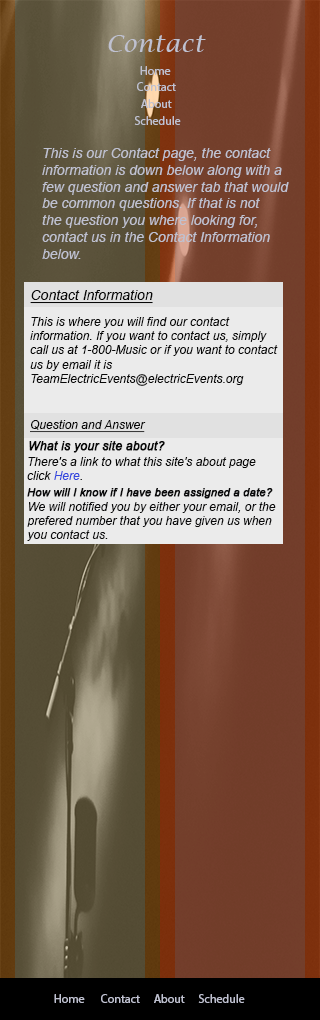
<style>
.page{position:relative;width:320px;height:1020px}
.page>*{position:absolute;margin:0}
.t1{font:24px "LucidaCalligraphy-Italic";color:#bfc1d0}
.t2{font:12px "MyriadPro-Regular";color:#bfc1d0}
.t3{font:14px "Arial-ItalicMT";color:#bfc1d0}
.t4{font:14px "Arial-ItalicMT";color:#080808;text-decoration:underline}
.t5{font:12px "Arial-ItalicMT";color:#080808}
.t6{font:12px "Arial-ItalicMT";color:#080808;text-decoration:underline}
.t7{font:12px "Arial-ItalicMT";color:#080808;font-weight:bold}
.t8{font:12px "Arial-ItalicMT";color:#3447de}
.t9{font:11px "Arial-ItalicMT";color:#0b0b0c;font-weight:bold}
.t10{font:12px "Arial-ItalicMT";color:#0b0b0c}
</style>
<div class="page">
<p class="t1" style="left:108px;top:35px;width:98px;height:17px">Contact</p>
<p class="t2" style="left:140px;top:66px;width:31px;height:9px">Home</p>
<p class="t2" style="left:137px;top:82px;width:39px;height:9px">Contact</p>
<p class="t2" style="left:141px;top:99px;width:31px;height:9px">About</p>
<p class="t2" style="left:134px;top:116px;width:47px;height:9px">Schedule</p>
<p class="t3" style="left:42px;top:148px;width:247px;height:111px">This is our Contact page, the contact<br>information is down below along with a <br>few question and answer tab that would <br>be common questions. If that is not <br>the question you where looking for, <br>contact us in the Contact Information <br>below.</p>
<p class="t4" style="left:30px;top:290px;width:123px;height:14px">Contact Information</p>
<p class="t5" style="left:30px;top:317px;width:248px;height:69px">This is where you will find our contact <br>information. If you want to contact us, simply <br>call us at 1-800-Music or if you want to contact<br>us by email it is <br>TeamElectricEvents@electricEvents.org</p>
<p class="t6" style="left:30px;top:420px;width:116px;height:13px">Question and Answer</p>
<p class="t7" style="left:29px;top:441px;width:136px;height:12px">What is your site about?</p>
<p class="t5" style="left:27px;top:457px;width:229px;height:23px">There's a link to what this site's about page <br>click <span class="t8">Here</span>.</p>
<p class="t9" style="left:27px;top:488px;width:246px;height:11px">How will I know if I have been assigned a date?</p>
<p class="t10" style="left:27px;top:502px;width:249px;height:39px">We will notified you by either your email, or the <br>prefered number that you have given us when <br>you contact us.</p>
<p class="t2" style="left:54px;top:994px;width:31px;height:9px">Home</p>
<p class="t2" style="left:101px;top:994px;width:39px;height:9px">Contact</p>
<p class="t2" style="left:154px;top:994px;width:31px;height:9px">About</p>
<p class="t2" style="left:198px;top:994px;width:47px;height:9px">Schedule</p>
</div>
